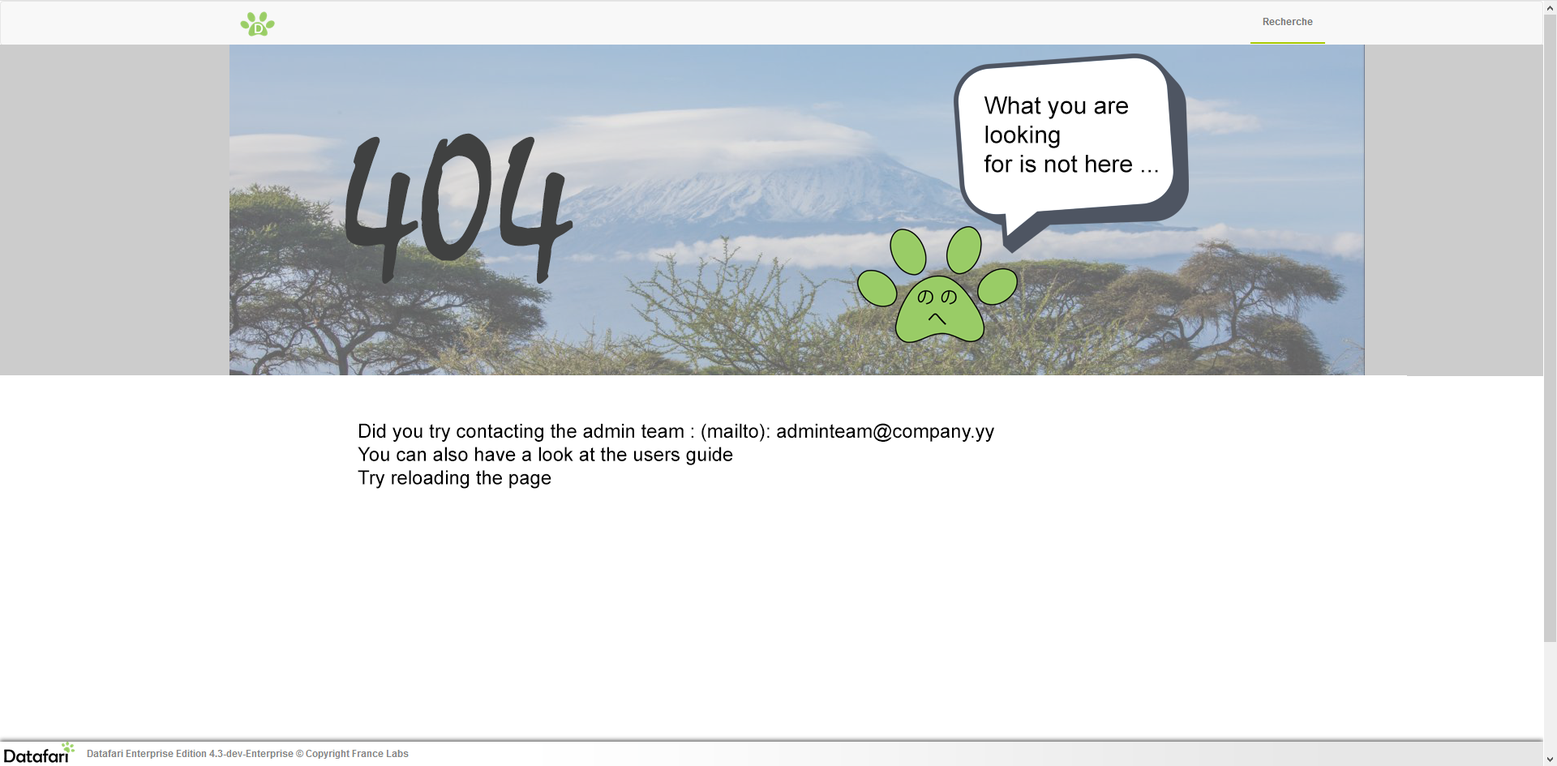
<style>
.page{position:relative;width:1557px;height:766px;background:#ffffff}
.page>*{position:absolute;margin:0}
.t1{font:24.3px "ArialMT";color:#000000}
.t2{font:184.1px "Mistral";color:#404141}
.t3{font:19.5px "ArialMT";color:#000000}
</style>
<div class="page">
<p class="t1" style="left:983px;top:96px;width:175px;height:77px">What you are <br>looking<br>for is not here ...</p>
<p class="t2" style="left:345px;top:133px;width:228px;height:151px">404</p>
<p class="t3" style="left:358px;top:423px;width:636px;height:66px">Did you try contacting the admin team : (mailto): adminteam@company.yy<br>You can also have a look at the users guide<br>Try reloading the page</p>
</div>
